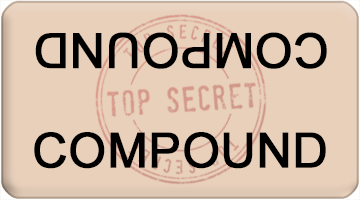
<style>
.page{position:relative;width:360px;height:200px;background:#e8d0bb}
.page>*{position:absolute;margin:0}
.t1{font:48px "ArialMT";color:#000000;font-weight:bold}
</style>
<div class="page">
<p class="t1" style="left:35px;top:32px;width:292px;height:37px;rotate:180deg">COMPOUND</p>
<p class="t1" style="left:34px;top:132px;width:292px;height:37px">COMPOUND</p>
</div>
